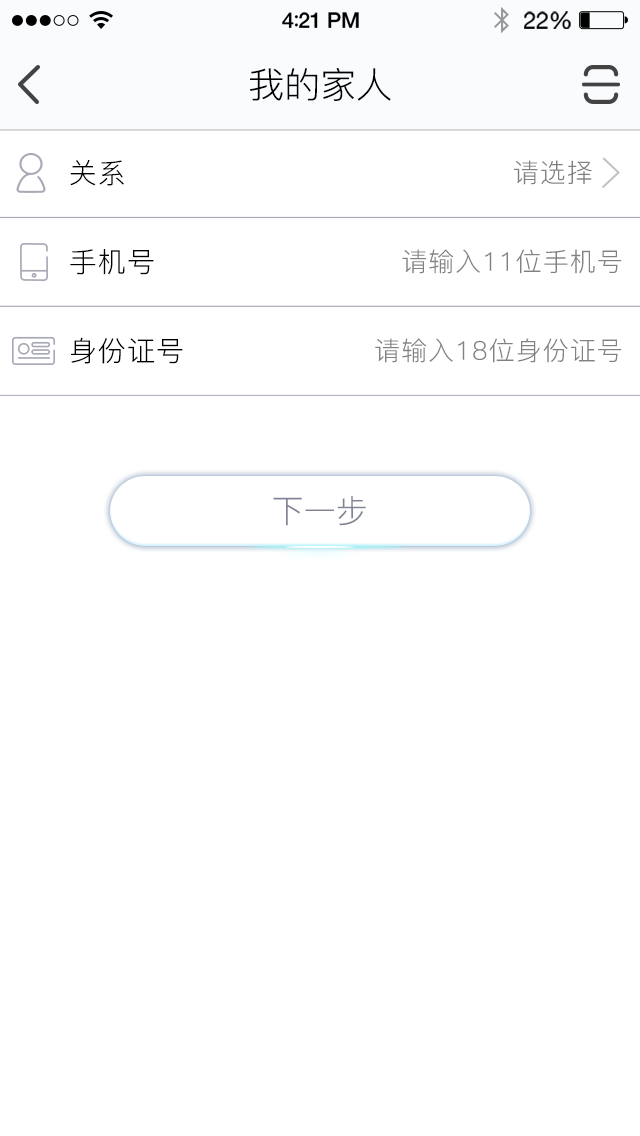
<style>
.page{position:relative;width:640px;height:1136px;background:#ffffff}
.page>*{position:absolute;margin:0}
.t1{font:36px "PingFang-SC-Regular";color:#000000}
.t2{font:28px "PingFang-SC-Regular";letter-spacing:0.04em;color:#000000}
.t3{font:26px "PingFang-SC-Regular";letter-spacing:0.04em;color:#808282}
.t4{font:32px "PingFang-SC-Regular";color:#7f8393}
</style>
<div class="page">
<p class="t1" style="left:250px;top:68px;width:141px;height:33px">我的家人</p>
<p class="t2" style="left:70px;top:159px;width:54px;height:27px">关系</p>
<p class="t3" style="left:514px;top:160px;width:78px;height:25px">请选择</p>
<p class="t2" style="left:70px;top:249px;width:84px;height:26px">手机号</p>
<p class="t3" style="left:402px;top:249px;width:220px;height:25px">请输入11位手机号</p>
<p class="t2" style="left:71px;top:337px;width:112px;height:27px">身份证号</p>
<p class="t3" style="left:375px;top:338px;width:247px;height:25px">请输入18位身份证号</p>
<p class="t4" style="left:273px;top:496px;width:93px;height:30px">下一步</p>
</div>
